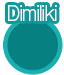
<style>
.page{position:relative;width:64px;height:75px;background:#078081}
.page>*{position:absolute;margin:0}
.t1{font:20px "GothicMB101Pro-Light";letter-spacing:-0.08em;color:#fff6f3;scale:0.9 1}
</style>
<div class="page">
<p class="t1" style="left:8px;top:5px;width:49px;height:16px">Dimiliki</p>
</div>
